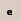
<style>
.page{position:relative;width:21px;height:21px;background:#d9cdc1}
.page>*{position:absolute;margin:0}
.t1{font:9px "Tahoma-Bold";color:#000000}
</style>
<div class="page">
<p class="t1" style="left:7px;top:10px;width:5px;height:5px">e</p>
</div>
